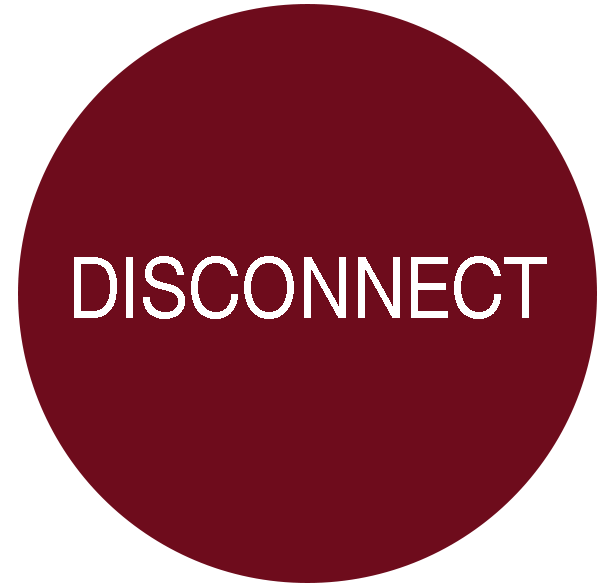
<style>
.page{position:relative;width:615px;height:587px;background:#6e0c1c}
.page>*{position:absolute;margin:0}
.t1{font:85.2px "HelveticaNeue";color:#ffffff;scale:0.87 1}
.t2{font:92.9px "HelveticaNeue";color:#ffffff;scale:0.87 1}
</style>
<div class="page">
<p class="t1" style="left:74px;top:256px;width:473px;height:63px"><span class="t2"><br><br></span>DISCONNECT</p>
</div>
